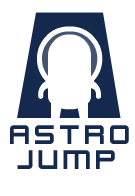
<style>
.page{position:relative;width:135px;height:196px;background:#ffffff}
.page>*{position:absolute;margin:0}
.t1{font:30px/25px "KenVector-Future";color:#15294e}
</style>
<div class="page">
<p class="t1" style="left:10px;top:125px;width:119px;height:44px;text-align:justify">ASTRO<br> JUMP</p>
</div>
